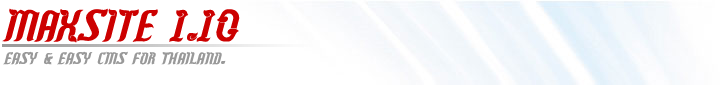
<style>
.page{position:relative;width:720px;height:85px;background:#ffffff}
.page>*{position:absolute;margin:0}
.t1{font:48px "SarunsManorah";color:#cc0000}
.t2{font:18px "SarunsManorah";color:#999999}
</style>
<div class="page">
<p class="t1" style="left:2px;top:8px;width:238px;height:35px">MAXSITE 1.10</p>
<p class="t2" style="left:3px;top:51px;width:223px;height:14px">Easy &amp; Easy CMS for thailand.</p>
</div>
